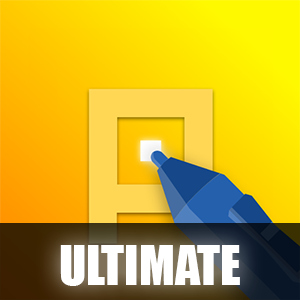
<style>
.page{position:relative;width:300px;height:300px}
.page>*{position:absolute;margin:0}
.t1{font:50px "Impact";color:#ffffff}
</style>
<div class="page">
<p class="t1" style="left:60px;top:245px;width:180px;height:41px">ULTIMATE</p>
</div>
